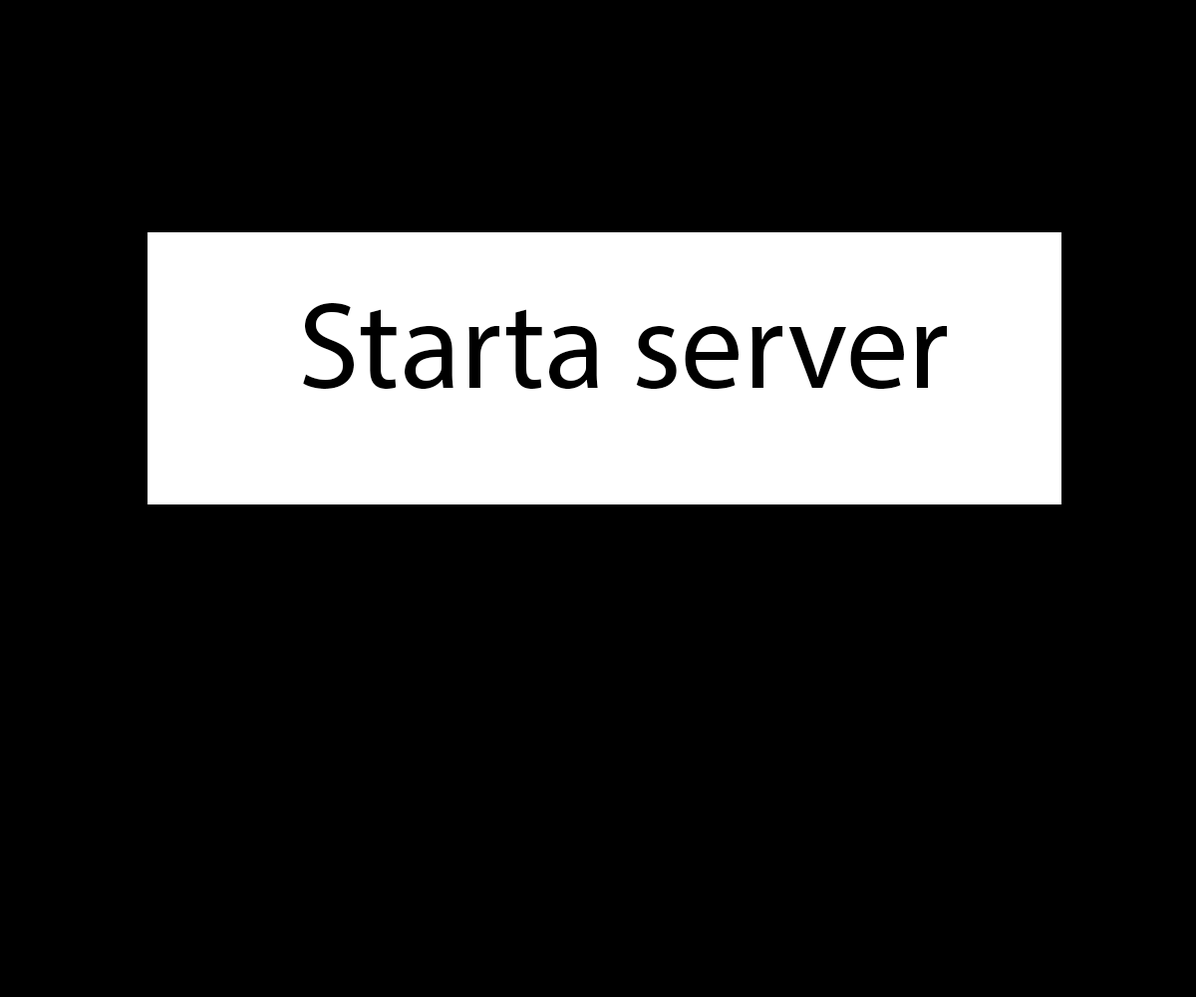
<style>
.page{position:relative;width:1196px;height:997px;background:#000000}
.page>*{position:absolute;margin:0}
.t1{font:124.6px "MyriadPro-Regular";color:#000000}
</style>
<div class="page">
<p class="t1" style="left:303px;top:303px;width:644px;height:87px">Starta server</p>
</div>
